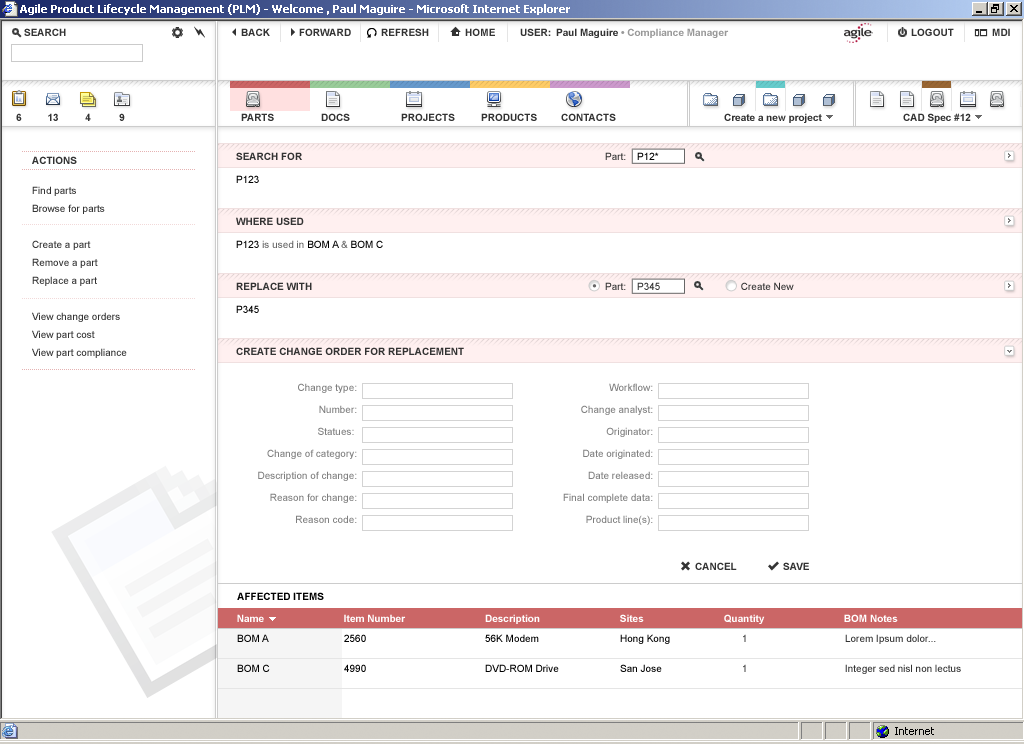
<style>
.page{position:relative;width:1024px;height:744px;background:#ffffff}
.page>*{position:absolute;margin:0}
.t1{font:10px "Arial-BoldMT";color:#333333}
.t2{font:10px "ArialMT"}
.t3{font:10px "ArialMT";color:#000000}
.t4{font:10px/18px "ArialMT";color:#333333}
.t5{font:10px "ArialMT";color:#666666}
.t6{font:10px "ArialMT";color:#333333}
.t7{font:10px/22px "ArialMT";color:#7f7f7f}
.t8{font:10px "Arial-BoldMT";color:#000000}
.t9{font:10px "Arial-BoldMT";color:#ffffff}
.t10{font:10px/10px "ArialMT";color:#000000}
.t11{font:10px/10px "ArialMT"}
.t12{font:10px/10px "ArialMT";color:#333333}
</style>
<div class="page">
<p class="t1" style="left:32px;top:156px;width:45px;height:8px">ACTIONS</p>
<p class="t1" style="left:236px;top:152px;width:66px;height:8px">SEARCH FOR</p>
<p class="t2" style="left:605px;top:152px;width:21px;height:8px">Part:</p>
<p class="t3" style="left:637px;top:152px;width:22px;height:8px">P12*</p>
<p class="t3" style="left:236px;top:175px;width:23px;height:8px">P123</p>
<p class="t4" style="left:32px;top:186px;width:95px;height:172px">Find parts<br>Browse for parts<br><br>Create a part<br>Remove a part<br>Replace a part<br><br>View change orders<br>View part cost<br>View part compliance</p>
<p class="t1" style="left:236px;top:217px;width:68px;height:8px">WHERE USED</p>
<p class="t5" style="left:236px;top:240px;width:147px;height:8px"><span class="t3">P123 </span>is used in <span class="t3">BOM A</span> &amp; <span class="t3">BOM C</span></p>
<p class="t1" style="left:236px;top:282px;width:76px;height:8px">REPLACE WITH</p>
<p class="t6" style="left:605px;top:282px;width:189px;height:8px">Part:             Create New</p>
<p class="t6" style="left:637px;top:282px;width:23px;height:8px">P345</p>
<p class="t3" style="left:236px;top:305px;width:23px;height:8px">P345</p>
<p class="t1" style="left:236px;top:347px;width:228px;height:8px">CREATE CHANGE ORDER FOR REPLACEMENT</p>
<p class="t7" style="left:258px;top:383px;width:99px;height:140px;text-align:right">Change type:<br>Number:<br>Statues: <br>Change of category:<br>Description of change:<br>Reason for change:<br>Reason code:</p>
<p class="t7" style="left:563px;top:383px;width:90px;height:142px;text-align:right">Workflow:<br>Change analyst:<br>Originator:<br>Date originated:<br>Date released:<br>Final complete data:<br>Product line(s):</p>
<p class="t1" style="left:695px;top:562px;width:42px;height:8px">CANCEL</p>
<p class="t1" style="left:783px;top:562px;width:26px;height:8px">SAVE</p>
<p class="t8" style="left:237px;top:592px;width:87px;height:8px">AFFECTED ITEMS</p>
<p class="t9" style="left:237px;top:614px;width:27px;height:8px">Name</p>
<p class="t9" style="left:344px;top:614px;width:62px;height:8px">Item Number</p>
<p class="t9" style="left:485px;top:614px;width:55px;height:10px">Description</p>
<p class="t9" style="left:620px;top:614px;width:24px;height:8px">Sites</p>
<p class="t9" style="left:724px;top:614px;width:41px;height:10px">Quantity</p>
<p class="t9" style="left:844px;top:614px;width:54px;height:8px">BOM Notes</p>
<p class="t10" style="left:237px;top:634px;width:33px;height:38px">BOM A<br><br><br>BOM C</p>
<p class="t10" style="left:344px;top:634px;width:22px;height:38px">2560<br><br><br>4990</p>
<p class="t10" style="left:485px;top:634px;width:74px;height:38px">56K Modem<br><br><br>DVD-ROM Drive</p>
<p class="t10" style="left:620px;top:634px;width:50px;height:38px">Hong Kong<br><br><br>San Jose</p>
<p class="t11" style="left:743px;top:634px;width:3px;height:38px">1<br><br><br>1</p>
<p class="t12" style="left:845px;top:634px;width:116px;height:40px">Lorem Ipsum dolor...<br><br><br>Integer sed nisl non lectus</p>
</div>
